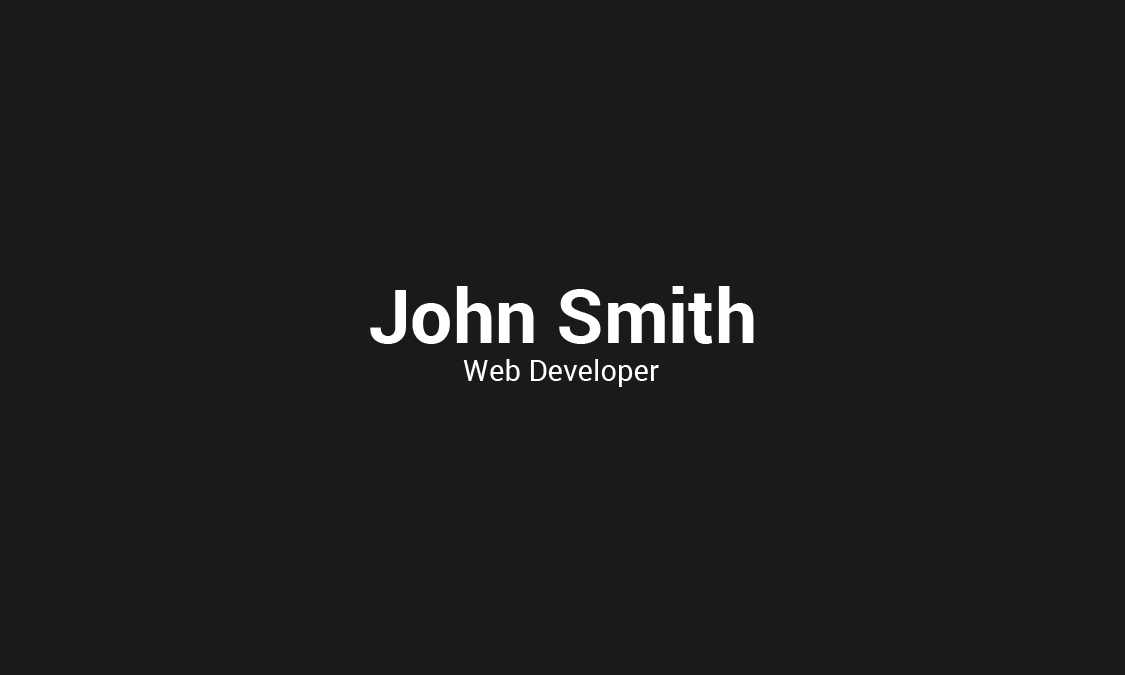
<style>
.page{position:relative;width:1125px;height:675px;background:#1a1a1a}
.page>*{position:absolute;margin:0}
.t1{font:75px "Roboto-Bold";color:#ffffff}
.t2{font:29.2px "Roboto-Regular";color:#ffffff}
</style>
<div class="page">
<p class="t1" style="left:370px;top:286px;width:384px;height:58px">John Smith</p>
<p class="t2" style="left:463px;top:359px;width:196px;height:28px">Web Developer</p>
</div>
